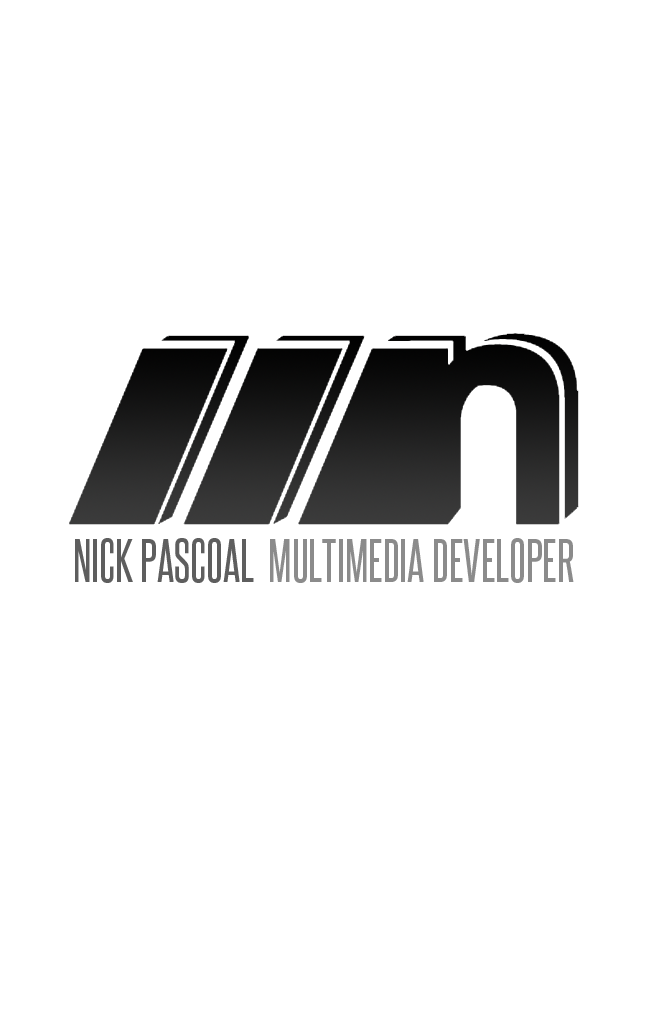
<style>
.page{position:relative;width:660px;height:1020px;background:#ffffff}
.page>*{position:absolute;margin:0}
.t1{font:51.7px "SteelfishRg-Regular";color:#8b8b8b}
.t2{font:51.7px "SteelfishRg-Regular";color:#5e5e5e}
</style>
<div class="page">
<p class="t1" style="left:75px;top:538px;width:499px;height:45px"><span class="t2">NICK PASCOAL  </span>MULTIMEDIA DEVELOPER</p>
</div>
